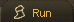
<style>
.page{position:relative;width:74px;height:22px}
.page>*{position:absolute;margin:0}
.t1{font:11px "ArialMT";color:#e9b62f}
</style>
<div class="page">
<p class="t1" style="left:33px;top:9px;width:18px;height:8px">Run</p>
</div>
